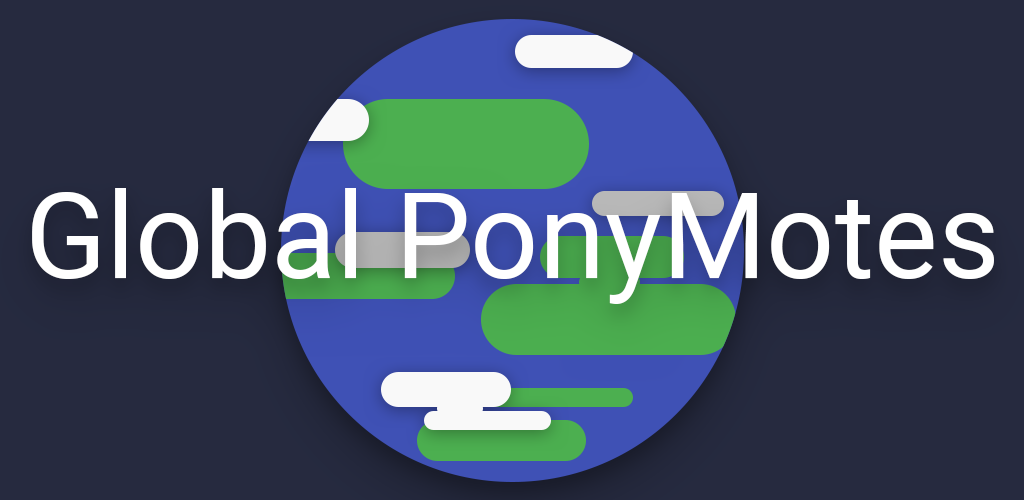
<style>
.page{position:relative;width:1024px;height:500px;background:#262a3f}
.page>*{position:absolute;margin:0}
.t1{font:120px "Roboto-Regular";color:#ffffff}
</style>
<div class="page">
<p class="t1" style="left:32px;top:188px;width:962px;height:116px">Global PonyMotes</p>
</div>
